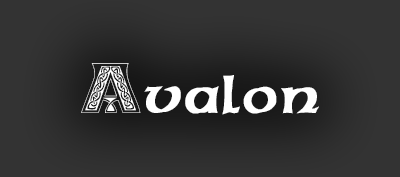
<style>
.page{position:relative;width:400px;height:177px;background:#333333}
.page>*{position:absolute;margin:0}
.t1{font:50px "CelticmdDecorativeWDropCaps";color:#ffffff}
</style>
<div class="page">
<p class="t1" style="left:81px;top:63px;width:238px;height:52px">Avalon</p>
</div>
